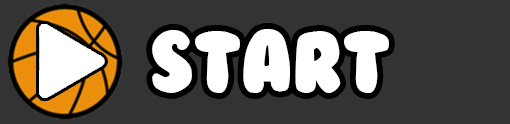
<style>
.page{position:relative;width:510px;height:124px;background:#333333}
.page>*{position:absolute;margin:0}
.t1{font:80px "BubbleGum";color:#ffffff}
</style>
<div class="page">
<p class="t1" style="left:152px;top:29px;width:237px;height:64px">Start</p>
</div>
